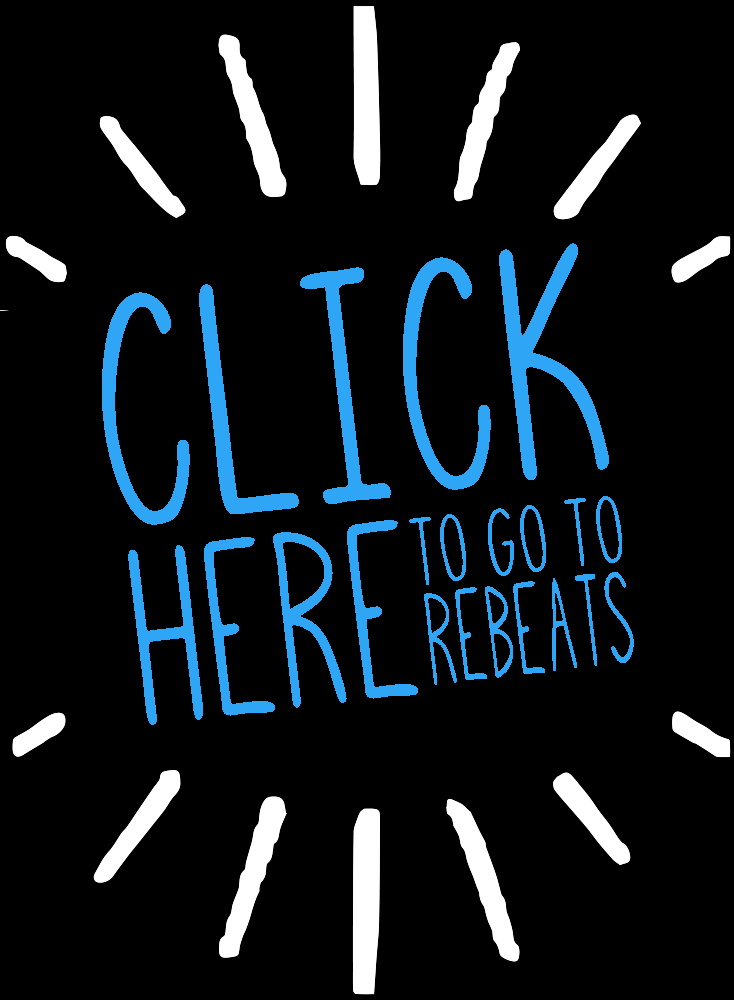
<style>
.page{position:relative;width:734px;height:1000px;background:#000000}
.page>*{position:absolute;margin:0}
.t1{font:310.1px "SquigglyAsta";letter-spacing:-0.01em;color:#2fa6f6;scale:0.9 1}
.t2{font:90.6px "SquigglyAsta";letter-spacing:-0.01em;color:#2fa6f6;scale:0.95 1}
.t3{font:235.4px "SquigglyAsta";letter-spacing:-0.01em;color:#2fa6f6;scale:0.82 1}
.t4{font:123.4px "SquigglyAsta";letter-spacing:-0.01em;color:#2fa6f6;scale:0.66 1}
</style>
<div class="page">
<p class="t1" style="left:102px;top:243px;width:507px;height:282px;rotate:-7deg">CLICK</p>
<p class="t2" style="left:409px;top:496px;width:213px;height:89px;rotate:-7deg">TO go TO</p>
<p class="t3" style="left:128px;top:520px;width:290px;height:205px;rotate:-7deg">HERE</p>
<p class="t4" style="left:424px;top:572px;width:210px;height:113px;rotate:-7deg">REBEATS</p>
</div>
